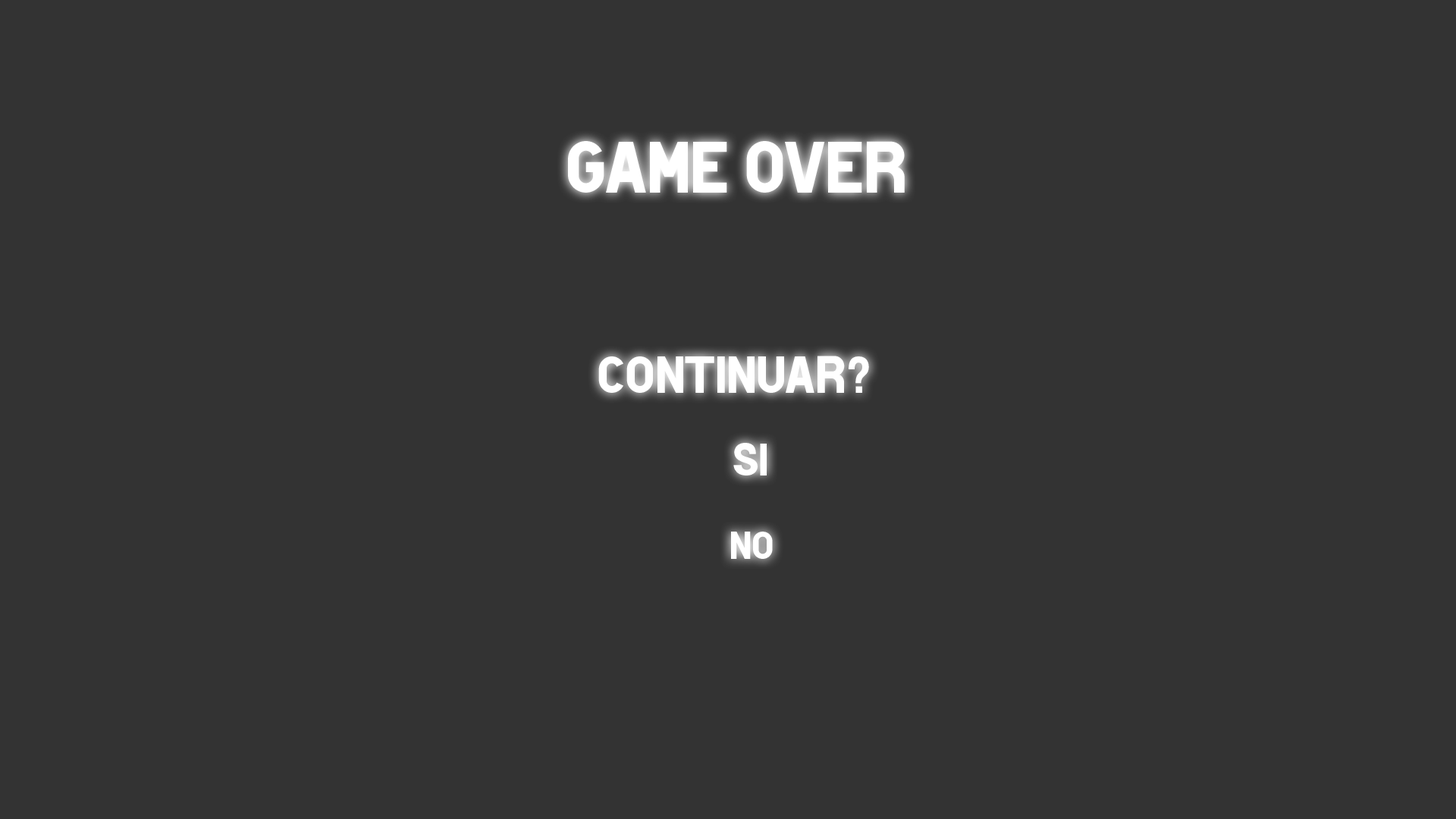
<style>
.page{position:relative;width:1456px;height:819px;background:#333333}
.page>*{position:absolute;margin:0}
.t1{font:72.8px "HotelDeParisXe";color:#ffffff}
.t2{font:52.2px "HotelDeParisXe";color:#ffffff}
.t3{font:46px "HotelDeParisXe";color:#ffffff}
.t4{font:38.7px "HotelDeParisXe";color:#ffffff}
</style>
<div class="page">
<p class="t1" style="left:568px;top:141px;width:337px;height:52px">Game Over</p>
<p class="t2" style="left:598px;top:356px;width:271px;height:37px">Continuar?</p>
<p class="t3" style="left:733px;top:443px;width:34px;height:32px">si</p>
<p class="t4" style="left:731px;top:532px;width:42px;height:27px">No</p>
</div>
